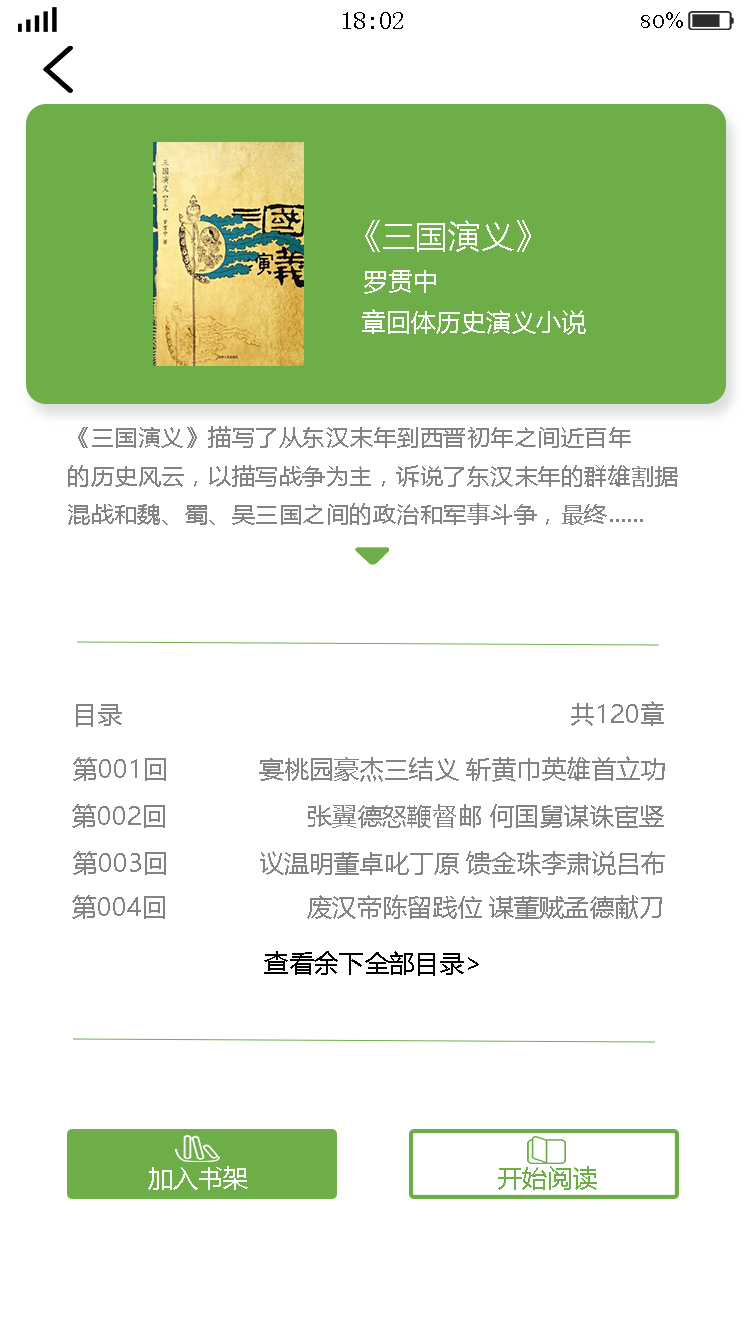
<style>
.page{position:relative;width:750px;height:1334px;background:#ffffff}
.page>*{position:absolute;margin:0}
.t1{font:25px "SimSun";color:#000000}
.t2{font:25px "BellMT";color:#000000}
.t3{font:33.3px "MicrosoftYaHei";color:#ffffff}
.t4{font:25px "MicrosoftYaHei";color:#ffffff}
.t5{font:21.9px "MicrosoftYaHei";color:#838383;scale:1.07 1}
.t6{font:25px "MicrosoftYaHei";color:#838383}
.t7{font:25px "MicrosoftYaHei";color:#000000}
.t8{font:25px "MicrosoftYaHei";color:#6dae49}
</style>
<div class="page">
<p class="t1" style="left:343px;top:12px;width:60px;height:17px">18:02</p>
<p class="t2" style="left:641px;top:12px;width:42px;height:16px">80%</p>
<p class="t3" style="left:365px;top:220px;width:166px;height:32px">《三国演义》</p>
<p class="t4" style="left:364px;top:270px;width:72px;height:24px">罗贯中</p>
<p class="t4" style="left:362px;top:309px;width:224px;height:26px">章回体历史演义小说</p>
<p class="t5" style="left:68px;top:426px;width:610px;height:99px">《三国演义》描写了从东汉末年到西晋初年之间近百年<br>的历史风云，以描写战争为主，诉说了东汉末年的群雄割据<br>混战和魏、蜀、吴三国之间的政治和军事斗争，最终……</p>
<p class="t6" style="left:76px;top:701px;width:588px;height:26px">目录                                                                共120章</p>
<p class="t6" style="left:73px;top:756px;width:592px;height:26px">第001回             宴桃园豪杰三结义 斩黄巾英雄首立功</p>
<p class="t6" style="left:72px;top:804px;width:592px;height:24px">第002回                    张翼德怒鞭督邮 何国舅谋诛宦竖</p>
<p class="t6" style="left:73px;top:850px;width:592px;height:26px">第003回             议温明董卓叱丁原 馈金珠李肃说吕布</p>
<p class="t6" style="left:72px;top:895px;width:590px;height:24px">第004回                    废汉帝陈留践位 谋董贼孟德献刀</p>
<p class="t7" style="left:264px;top:951px;width:215px;height:25px">查看余下全部目录&gt;</p>
<p class="t4" style="left:148px;top:1166px;width:100px;height:24px">加入书架</p>
<p class="t8" style="left:498px;top:1166px;width:99px;height:24px">开始阅读</p>
</div>
